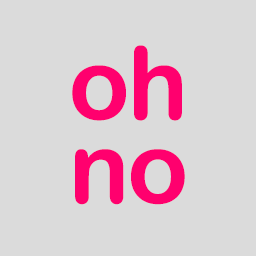
<style>
.page{position:relative;width:256px;height:256px;background:#dbdbdb}
.page>*{position:absolute;margin:0}
.t1{font:100.9px/83.8px "ArialRoundedMTBold";letter-spacing:-0.05em;color:#ff006e;font-weight:bold}
</style>
<div class="page">
<p class="t1" style="left:72px;top:45px;width:113px;height:160px;text-align:center">oh<br>no</p>
</div>
